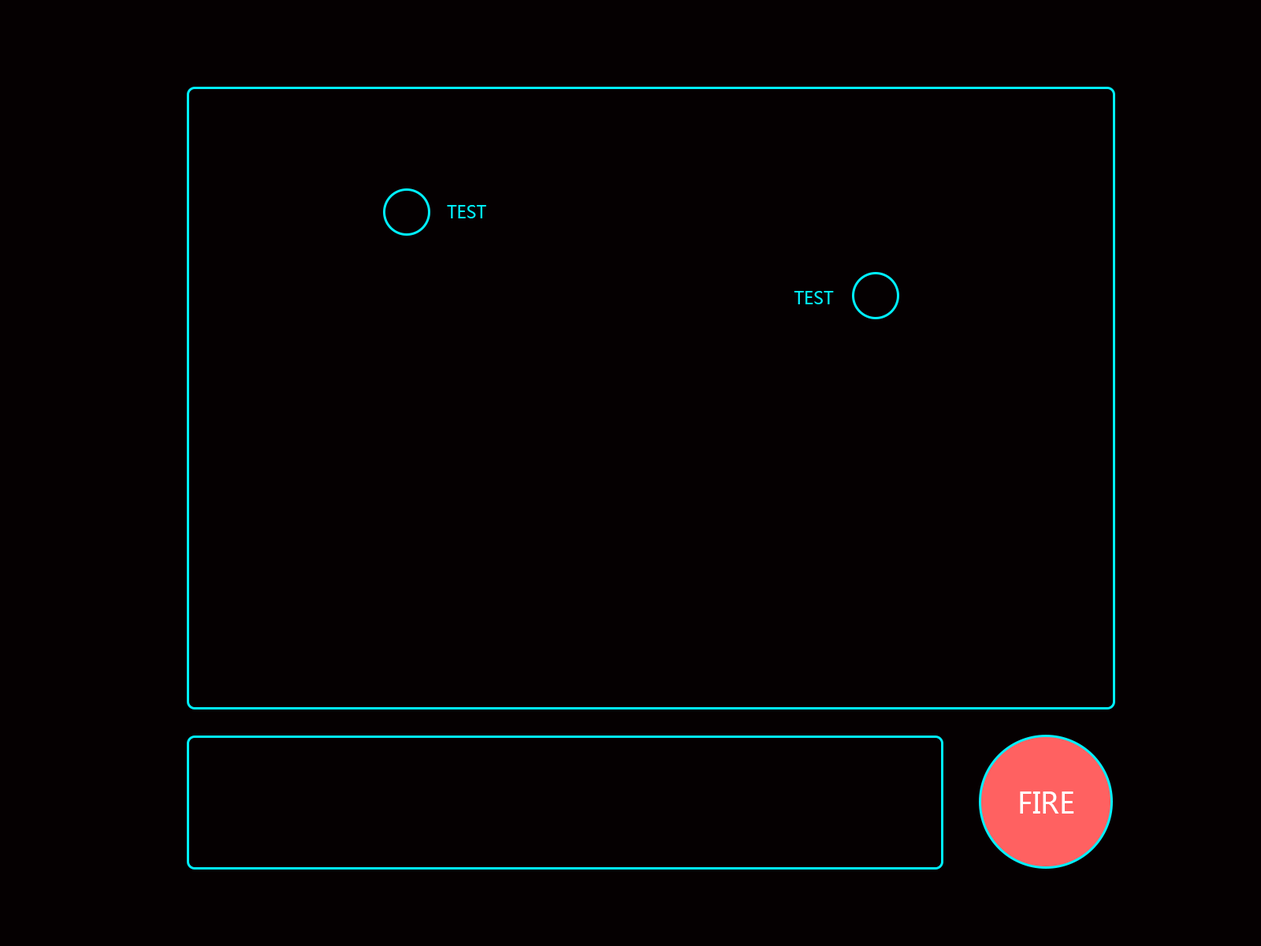
<style>
.page{position:relative;width:1261px;height:946px;background:#050001}
.page>*{position:absolute;margin:0}
.t1{font:17.3px "MicrosoftYaHei";color:#00f0ff;text-transform:uppercase}
.t2{font:28.4px "MicrosoftYaHei";color:#ffffff;text-transform:uppercase}
</style>
<div class="page">
<p class="t1" style="left:447px;top:205px;width:39px;height:13px">test</p>
<p class="t1" style="left:794px;top:291px;width:40px;height:13px">test</p>
<p class="t2" style="left:1020px;top:791px;width:54px;height:22px">fire</p>
</div>
